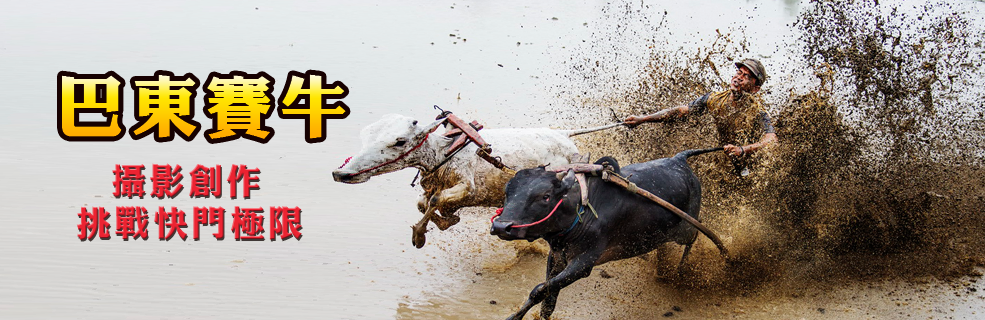
<style>
.page{position:relative;width:985px;height:320px}
.page>*{position:absolute;margin:0}
.t1{font:67.7px "DFLiKingHei-XB-WIN-BF"}
.t2{font:35px "DFLiKingHei-XB-WIN-BF";color:#ec2331}
.t3{font:35px "DFLiKingHei-XB-WIN-BF";color:#7b1a0a}
</style>
<div class="page">
<p class="t1" style="left:62px;top:74px;width:284px;height:65px">巴東賽牛</p>
<p class="t2" style="left:76px;top:163px;width:226px;height:77px"><span class="t3">  </span>攝影創作<br>挑戰快門極限</p>
</div>
